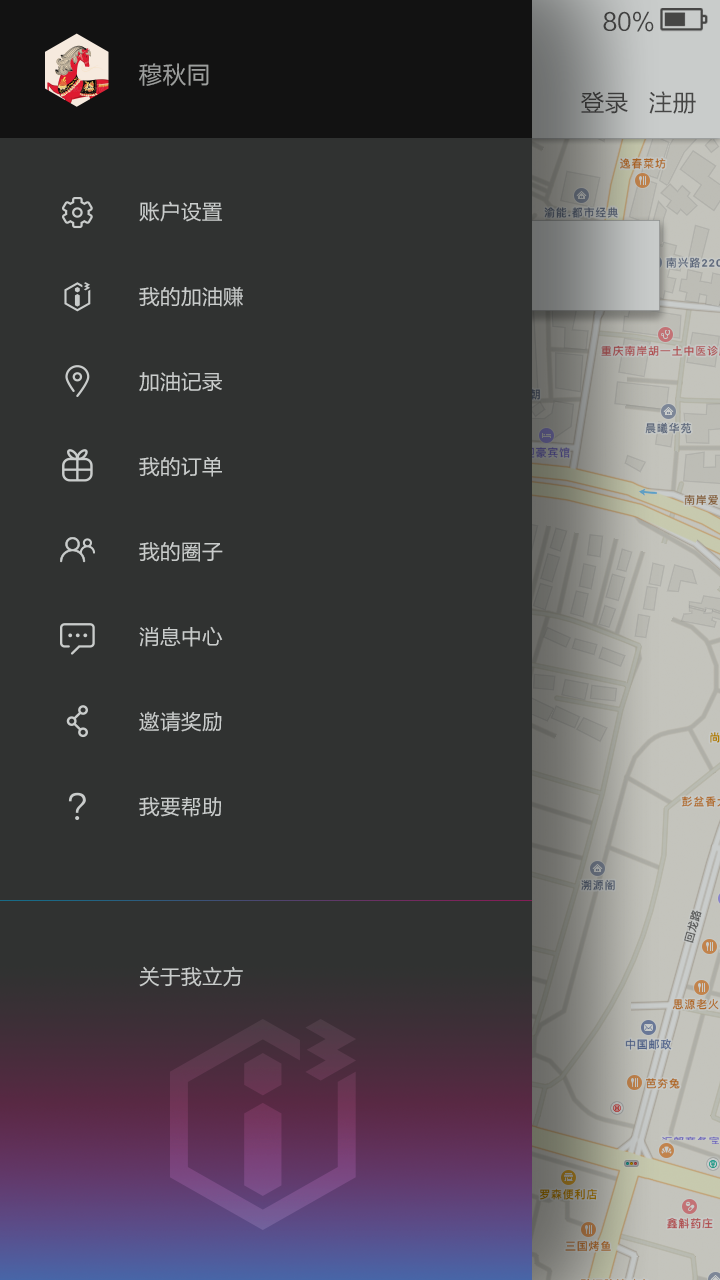
<style>
.page{position:relative;width:720px;height:1280px;background:#303231}
.page>*{position:absolute;margin:0}
.t1{font:24px "FZLTHK--GBK1-0";color:#595757}
.t2{font:24px "FZLTHK--GBK1-0";color:#9d9f9e}
.t3{font:24px "FZLTHK--GBK1-0";color:#454544}
.t4{font:21px/85px "FZLTHK--GBK1-0";color:#c9cccb}
</style>
<div class="page">
<p class="t1" style="left:603px;top:11px;width:51px;height:21px">80%</p>
<p class="t2" style="left:139px;top:63px;width:70px;height:23px">穆秋同</p>
<p class="t3" style="left:581px;top:91px;width:115px;height:23px">登录   注册</p>
<p class="t4" style="left:139px;top:201px;width:104px;height:786px">账户设置<br>我的加油赚<br>加油记录<br>我的订单<br>我的圈子<br>消息中心<br>邀请奖励<br>我要帮助<br><br>关于我立方</p>
</div>
